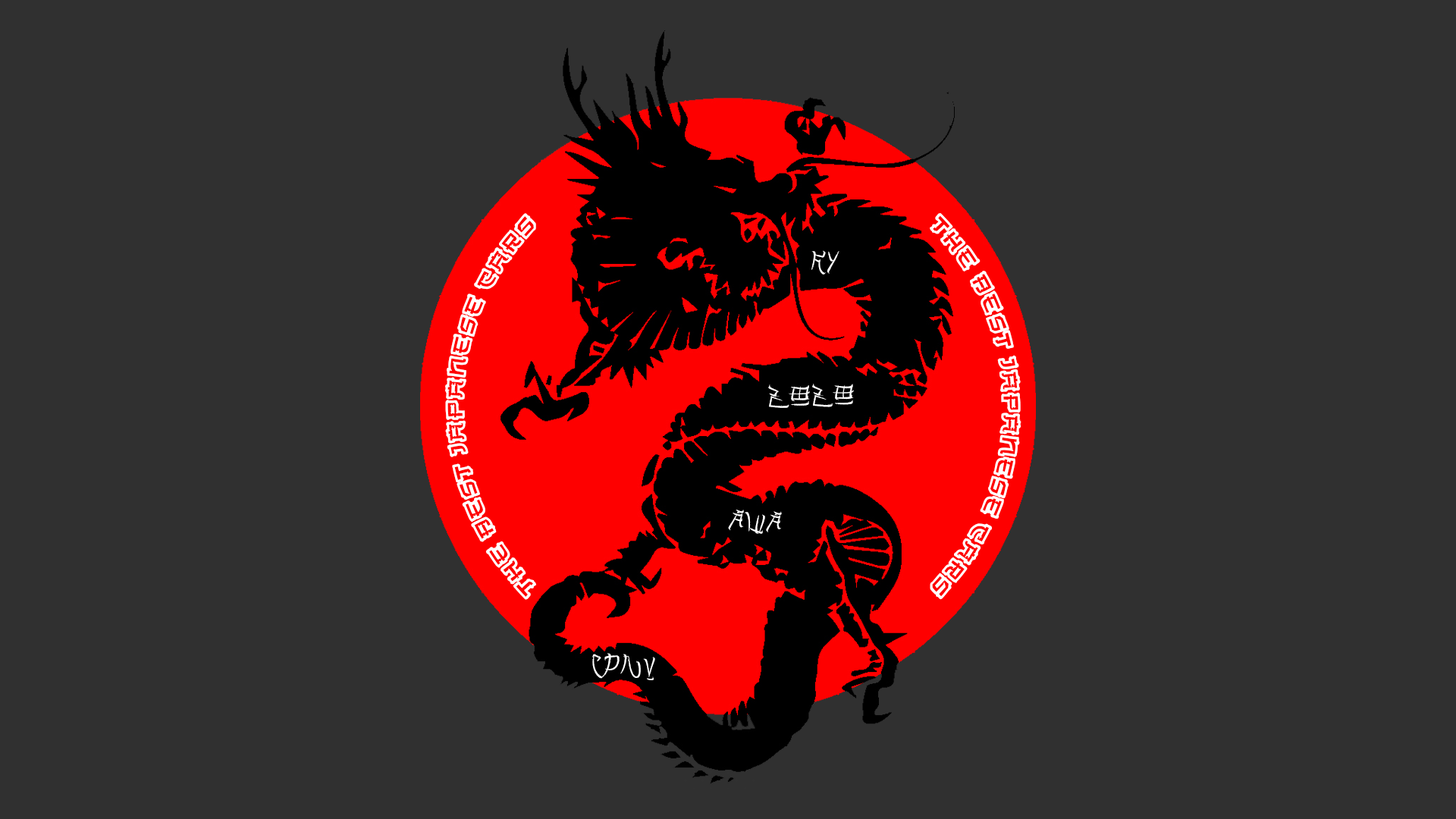
<style>
.page{position:relative;width:1456px;height:819px;background:#303030}
.page>*{position:absolute;margin:0}
.t1{font:27px "OldJapanese";color:#ffffff}
.t2{font:31.6px "Brushido";color:#ffffff}
.t3{font:28.4px "Brushido";color:#ffffff}
</style>
<div class="page">
<p class="t1" style="left:444px;top:213px;width:93px;height:387px;rotate:-90deg">The best japanese cars</p>
<p class="t1" style="left:930px;top:213px;width:91px;height:387px;rotate:90deg">The best japanese cars</p>
<p class="t2" style="left:811px;top:250px;width:28px;height:25px;rotate:3deg">KY</p>
<p class="t2" style="left:768px;top:384px;width:86px;height:24px;rotate:-1deg">zozo</p>
<p class="t3" style="left:728px;top:510px;width:54px;height:24px;rotate:3deg">AWA</p>
<p class="t2" style="left:592px;top:653px;width:63px;height:27px;rotate:3deg">CPNV</p>
</div>
